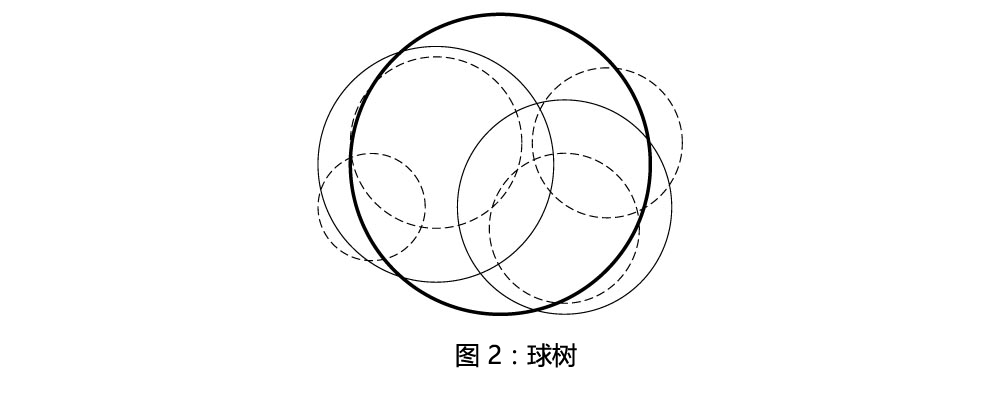
<style>
.page{position:relative;width:1003px;height:400px;background:#ffffff}
.page>*{position:absolute;margin:0}
.t1{font:25px "MicrosoftYaHei";color:#000000}
</style>
<div class="page">
<p class="t1" style="left:456px;top:343px;width:121px;height:25px">图 2：球树</p>
</div>
